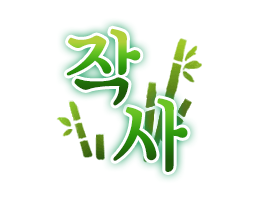
<style>
.page{position:relative;width:262px;height:201px;background:#ffffff}
.page>*{position:absolute;margin:0}
.t1{font:85.3px "SDKukdetopokki-aLt";letter-spacing:0.08em}
</style>
<div class="page">
<p class="t1" style="left:66px;top:28px;width:75px;height:78px">작</p>
<p class="t1" style="left:113px;top:98px;width:75px;height:74px">사</p>
</div>
